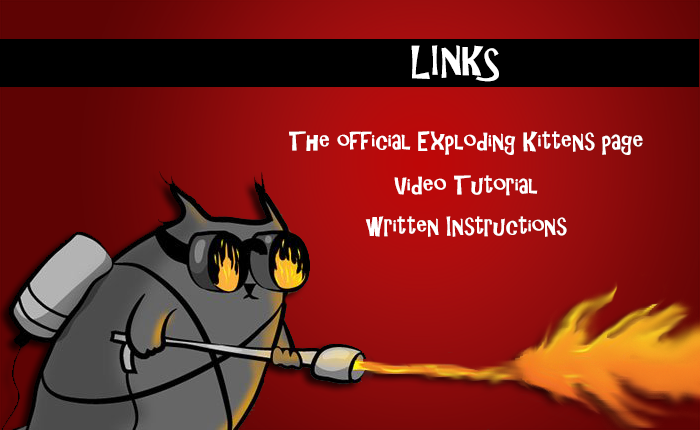
<style>
.page{position:relative;width:700px;height:430px}
.page>*{position:absolute;margin:0}
.t1{font:36px "ARCHRISTY";color:#ffffff}
.t2{font:24px "ARCHRISTY";color:#ffffff}
</style>
<div class="page">
<p class="t1" style="left:411px;top:45px;width:88px;height:37px">LINKS</p>
<p class="t2" style="left:289px;top:131px;width:354px;height:24px">The official Exploding Kittens page</p>
<p class="t2" style="left:394px;top:175px;width:144px;height:21px">Video Tutorial</p>
<p class="t2" style="left:365px;top:216px;width:202px;height:21px">written Instructions</p>
</div>
